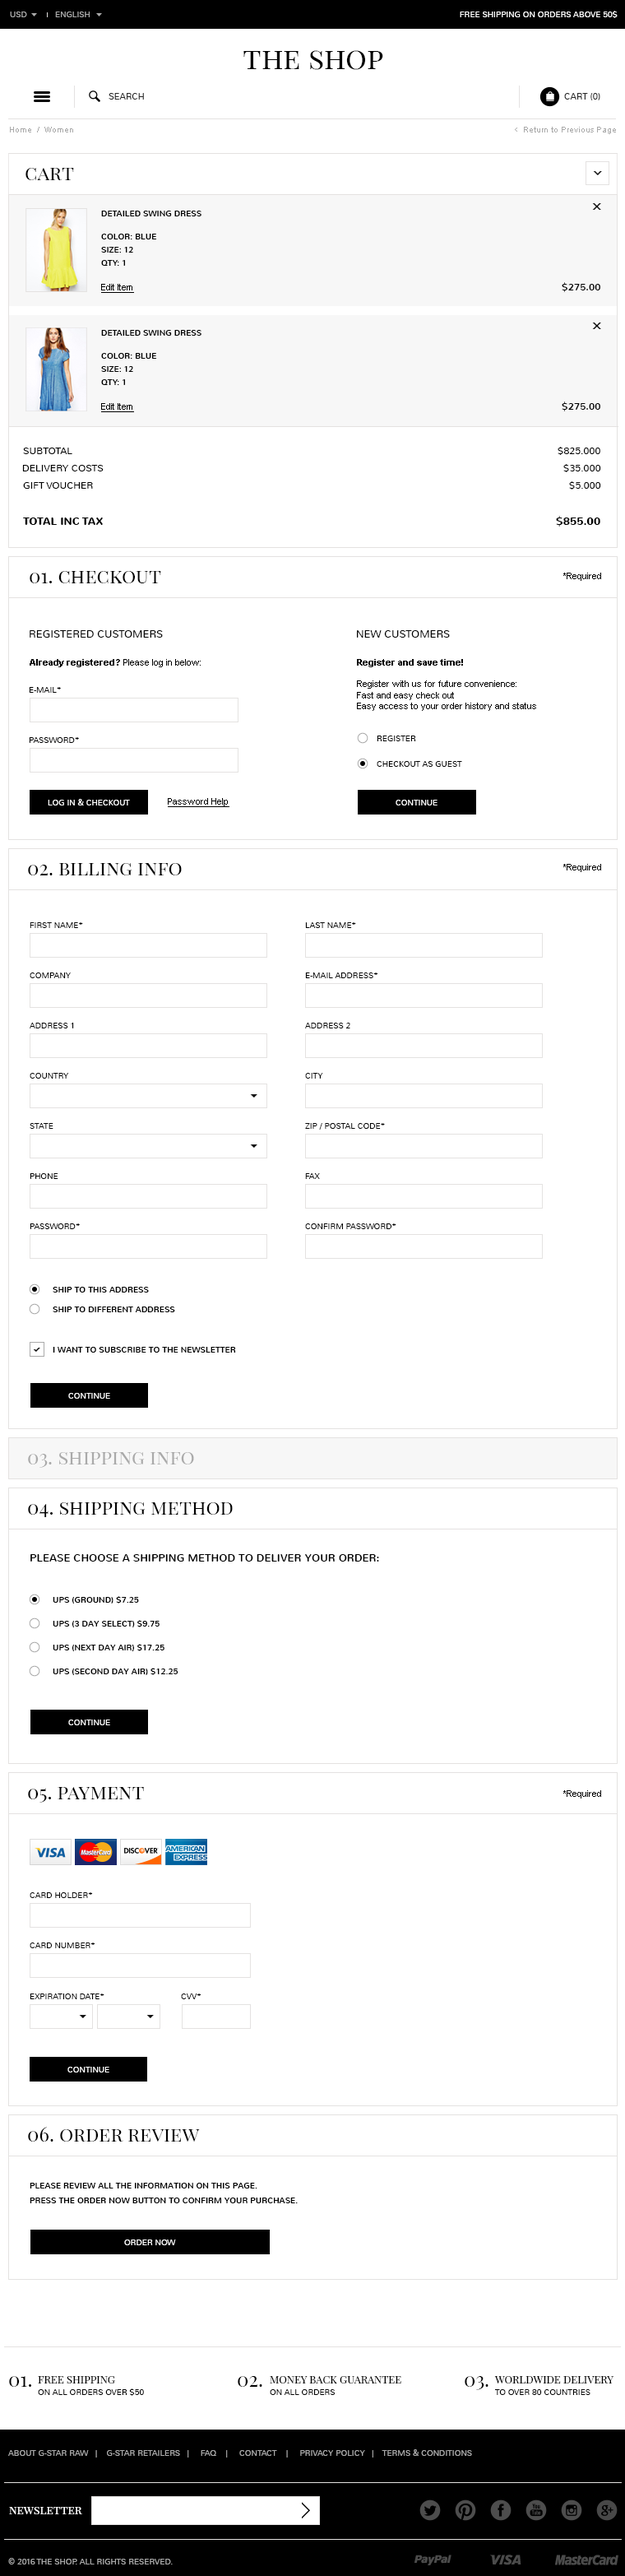
<style>
.page{position:relative;width:625px;height:2576px;background:#ffffff}
.page>*{position:absolute;margin:0}
.t1{font:8.2px "Nunito-Light";color:#aaaaaa;text-transform:uppercase}
.t2{font:8.2px "Nunito-Light";color:#ffffff;text-transform:uppercase}
.t3{font:29.6px "PlayfairDisplaySC-Regular";color:#000000}
.t4{font:9.1px "Nunito-Light";color:#282828;text-transform:uppercase}
.t5{font:8.2px "ArialMT";color:#aaaaaa}
.t6{font:9.9px "Cabin-Regular";color:#aaaaaa}
.t7{font:19.7px "PlayfairDisplaySC-Regular";color:#000000}
.t8{font:8.2px "Nunito-Regular";color:#000000;text-transform:uppercase}
.t9{font:9.1px "ArialMT";color:#000000;text-decoration:underline}
.t10{font:9.9px "Nunito-Regular";color:#000000;text-transform:uppercase}
.t11{font:9.9px "Nunito-Light";color:#000000;text-transform:uppercase}
.t12{font:10.7px "Nunito-Bold";color:#000000;text-transform:uppercase}
.t13{font:9.1px "ArialMT";color:#000000}
.t14{font:10.7px "Nunito-Light";color:#000000;text-transform:uppercase}
.t15{font:9.1px "Arial-BoldMT";color:#000000}
.t16{font:8.2px "Nunito-Light";color:#000000;text-transform:uppercase}
.t17{font:19.7px "PlayfairDisplaySC-Regular";color:#aaaaaa}
.t18{font:10.7px "Nunito-Regular";color:#000000;text-transform:uppercase}
.t19{font:8.2px/14.8px "Nunito-Regular";color:#000000;text-transform:uppercase}
.t20{font:10.7px "PlayfairDisplaySC-Regular";color:#000000;text-transform:uppercase}
.t21{font:11.5px "PlayfairDisplaySC-Regular";color:#ffffff}
</style>
<div class="page">
<p class="t1" style="left:10px;top:12px;width:17px;height:5px">usD</p>
<p class="t1" style="left:55px;top:12px;width:35px;height:5px">English</p>
<p class="t2" style="left:460px;top:11px;width:158px;height:7px">free shipping on orders above 50$</p>
<p class="t3" style="left:244px;top:50px;width:139px;height:20px">the shop</p>
<p class="t4" style="left:109px;top:93px;width:35px;height:7px">search</p>
<p class="t4" style="left:564px;top:93px;width:37px;height:7px">Cart (0)</p>
<p class="t5" style="left:10px;top:127px;width:63px;height:5px">Home  /  Women</p>
<p class="t6" style="left:515px;top:128px;width:3px;height:4px">&lt;</p>
<p class="t5" style="left:524px;top:127px;width:92px;height:7px">Return to Previous Page</p>
<p class="t7" style="left:26px;top:168px;width:48px;height:12px">cart</p>
<p class="t8" style="left:101px;top:211px;width:101px;height:5px">detailed swing dress</p>
<p class="t8" style="left:101px;top:234px;width:55px;height:5px">color: blue</p>
<p class="t8" style="left:101px;top:247px;width:32px;height:6px">size: 12</p>
<p class="t8" style="left:101px;top:260px;width:24px;height:6px">qty: 1</p>
<p class="t9" style="left:101px;top:284px;width:33px;height:9px">Edit Item</p>
<p class="t10" style="left:562px;top:282px;width:39px;height:10px">$275.00</p>
<p class="t8" style="left:101px;top:330px;width:101px;height:6px">detailed swing dress</p>
<p class="t8" style="left:101px;top:353px;width:55px;height:6px">color: blue</p>
<p class="t8" style="left:101px;top:366px;width:32px;height:6px">size: 12</p>
<p class="t8" style="left:101px;top:379px;width:24px;height:6px">qty: 1</p>
<p class="t10" style="left:562px;top:401px;width:39px;height:10px">$275.00</p>
<p class="t9" style="left:101px;top:403px;width:33px;height:9px">Edit Item</p>
<p class="t11" style="left:23px;top:448px;width:49px;height:6px">subtotal</p>
<p class="t11" style="left:558px;top:447px;width:43px;height:8px">$825.000</p>
<p class="t11" style="left:22px;top:465px;width:82px;height:6px">delivery costs</p>
<p class="t11" style="left:564px;top:464px;width:37px;height:8px">$35.000</p>
<p class="t11" style="left:23px;top:482px;width:70px;height:7px">gift voucher</p>
<p class="t11" style="left:569px;top:481px;width:32px;height:9px">$5.000</p>
<p class="t12" style="left:23px;top:518px;width:80px;height:7px">total inc tax</p>
<p class="t12" style="left:556px;top:516px;width:45px;height:11px">$855.00</p>
<p class="t7" style="left:30px;top:571px;width:131px;height:12px">01. checkout</p>
<p class="t13" style="left:564px;top:573px;width:37px;height:8px">*Required</p>
<p class="t14" style="left:30px;top:630px;width:133px;height:8px">registered customers</p>
<p class="t14" style="left:357px;top:630px;width:93px;height:8px">new customers</p>
<p class="t13" style="left:30px;top:659px;width:171px;height:8px"><span class="t15">Already registered?</span> Please log in below:</p>
<p class="t13" style="left:357px;top:659px;width:179px;height:52px"><span class="t15">Register and save time!<br></span><br>Register with us for future convenience:<br>Fast and easy check out<br>Easy access to your order history and status</p>
<p class="t16" style="left:29px;top:687px;width:32px;height:6px">e-mail*</p>
<p class="t16" style="left:29px;top:737px;width:50px;height:6px">password*</p>
<p class="t16" style="left:377px;top:736px;width:39px;height:5px">register</p>
<p class="t16" style="left:377px;top:761px;width:85px;height:6px">checkout as guest</p>
<p class="t2" style="left:48px;top:799px;width:82px;height:6px">log in &amp; checkout</p>
<p class="t9" style="left:168px;top:798px;width:62px;height:9px">Password Help</p>
<p class="t2" style="left:396px;top:800px;width:42px;height:5px">continue</p>
<p class="t7" style="left:28px;top:863px;width:154px;height:12px">02. billing info</p>
<p class="t13" style="left:564px;top:864px;width:37px;height:8px">*Required</p>
<p class="t16" style="left:30px;top:922px;width:53px;height:6px">first name*</p>
<p class="t16" style="left:305px;top:922px;width:51px;height:6px">last name*</p>
<p class="t16" style="left:30px;top:972px;width:41px;height:6px">company</p>
<p class="t16" style="left:305px;top:972px;width:73px;height:6px">e-mail address*</p>
<p class="t16" style="left:30px;top:1023px;width:44px;height:5px">Address 1</p>
<p class="t16" style="left:305px;top:1023px;width:45px;height:5px">address 2</p>
<p class="t16" style="left:30px;top:1073px;width:38px;height:6px">country</p>
<p class="t16" style="left:305px;top:1073px;width:18px;height:6px">city</p>
<p class="t16" style="left:30px;top:1123px;width:23px;height:6px">state</p>
<p class="t16" style="left:305px;top:1123px;width:80px;height:7px">zip / postal code*</p>
<p class="t16" style="left:30px;top:1173px;width:28px;height:6px">Phone</p>
<p class="t16" style="left:305px;top:1173px;width:15px;height:6px">fax</p>
<p class="t16" style="left:30px;top:1223px;width:50px;height:6px">password*</p>
<p class="t16" style="left:305px;top:1223px;width:92px;height:6px">confirm password*</p>
<p class="t8" style="left:53px;top:1287px;width:96px;height:6px">ship to this address</p>
<p class="t8" style="left:53px;top:1307px;width:122px;height:5px">ship to different address</p>
<p class="t8" style="left:53px;top:1347px;width:183px;height:6px">I want to subscribe to the newsletter</p>
<p class="t2" style="left:68px;top:1393px;width:42px;height:6px">continue</p>
<p class="t17" style="left:28px;top:1452px;width:166px;height:16px">03. shipping info</p>
<p class="t7" style="left:28px;top:1502px;width:205px;height:15px">04. shipping method</p>
<p class="t18" style="left:30px;top:1554px;width:349px;height:8px">please choose a shipping method to deliver your order:</p>
<p class="t8" style="left:53px;top:1596px;width:86px;height:8px">UPS (Ground) $7.25</p>
<p class="t8" style="left:53px;top:1620px;width:107px;height:7px">UPS (3 day select) $9.75</p>
<p class="t8" style="left:53px;top:1644px;width:112px;height:7px">UPS (next day air) $17.25</p>
<p class="t8" style="left:53px;top:1668px;width:126px;height:7px">UPS (second day air) $12.25</p>
<p class="t2" style="left:68px;top:1720px;width:42px;height:5px">continue</p>
<p class="t7" style="left:28px;top:1787px;width:116px;height:16px">05. payment</p>
<p class="t13" style="left:564px;top:1790px;width:37px;height:9px">*Required</p>
<p class="t16" style="left:30px;top:1892px;width:63px;height:6px">card holder*</p>
<p class="t16" style="left:30px;top:1942px;width:65px;height:6px">card number*</p>
<p class="t16" style="left:30px;top:1993px;width:74px;height:6px">expiration date*</p>
<p class="t16" style="left:181px;top:1993px;width:21px;height:6px">cvv*</p>
<p class="t2" style="left:67px;top:2067px;width:42px;height:5px">continue</p>
<p class="t7" style="left:28px;top:2127px;width:172px;height:15px">06. order review</p>
<p class="t19" style="left:30px;top:2183px;width:268px;height:20px">Please review all the information on this page.<br>Press the Order Now button to confirm your purchase.</p>
<p class="t2" style="left:124px;top:2239px;width:52px;height:6px">order now</p>
<p class="t7" style="left:9px;top:2376px;width:22px;height:11px">01.</p>
<p class="t20" style="left:38px;top:2376px;width:77px;height:7px">Free Shipping</p>
<p class="t7" style="left:238px;top:2376px;width:24px;height:11px">02.</p>
<p class="t20" style="left:270px;top:2376px;width:131px;height:7px">Money back guarantee</p>
<p class="t7" style="left:465px;top:2376px;width:24px;height:14px">03.</p>
<p class="t20" style="left:494px;top:2376px;width:120px;height:7px">Worldwide Delivery</p>
<p class="t16" style="left:38px;top:2388px;width:106px;height:8px">On all orders over $50</p>
<p class="t16" style="left:270px;top:2389px;width:66px;height:6px">On all orders</p>
<p class="t16" style="left:495px;top:2389px;width:96px;height:6px">To over 80 countries</p>
<p class="t1" style="left:8px;top:2449px;width:464px;height:9px">About G-Star Raw   |    G-Star Retailers   |     FAQ    |     Contact    |     Privacy Policy   |    Terms &amp; Conditions</p>
<p class="t21" style="left:9px;top:2507px;width:73px;height:7px">newsletter</p>
<p class="t1" style="left:8px;top:2558px;width:165px;height:6px">© 2016 the shop. All Rights Reserved.</p>
</div>
